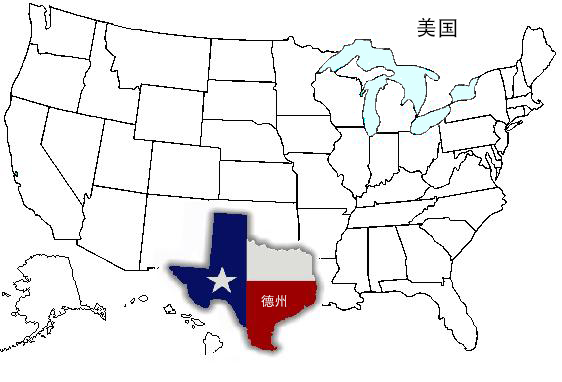
<style>
.page{position:relative;width:562px;height:382px;background:#ffffff}
.page>*{position:absolute;margin:0}
.t1{font:21.3px "AdobeHeitiStd-Regular";color:#000000}
.t2{font:13.3px "STHeitiSC-Light";color:#ffffff}
</style>
<div class="page">
<p class="t1" style="left:417px;top:17px;width:40px;height:21px">美国</p>
<p class="t2" style="left:261px;top:295px;width:26px;height:12px">德州</p>
</div>
